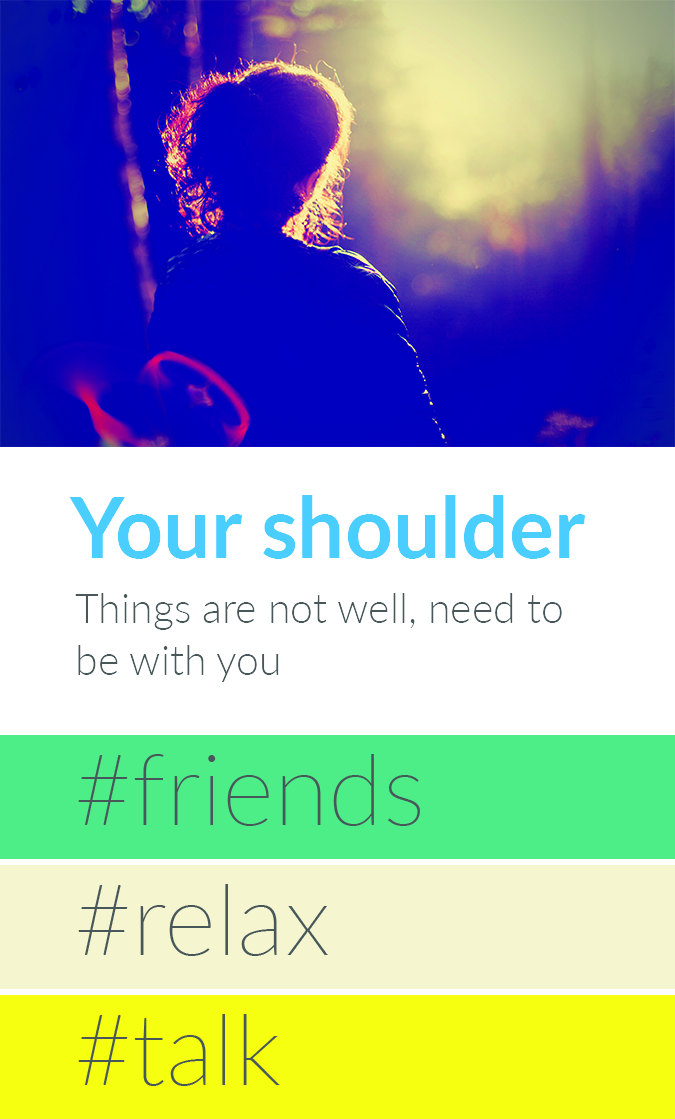
<style>
.page{position:relative;width:675px;height:1119px;background:#ffffff}
.page>*{position:absolute;margin:0}
.t1{font:84px "Lato-Bold";color:#4acdff}
.t2{font:41px/52px "Lato-Light";color:#48585a}
</style>
<div class="page">
<p class="t1" style="left:69px;top:495px;width:516px;height:64px">Your shoulder</p>
<p class="t2" style="left:75px;top:593px;width:487px;height:89px;text-align:right">Things are not well, need to be with you</p>
</div>
